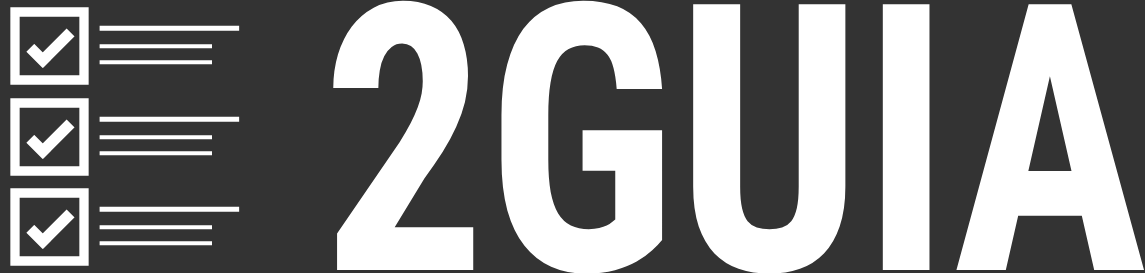
<style>
.page{position:relative;width:1145px;height:273px;background:#333333}
.page>*{position:absolute;margin:0}
.t1{font:373.7px "RobotoCondensed-Bold";color:#ffffff;scale:0.87 1}
</style>
<div class="page">
<p class="t1" style="left:333px;top:0px;width:812px;height:274px">2GUIA</p>
</div>
